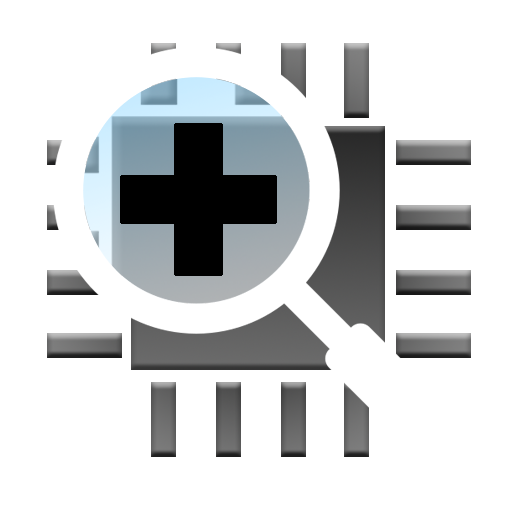
<style>
.page{position:relative;width:512px;height:512px;background:#ffffff}
.page>*{position:absolute;margin:0}
.t1{font:279.1px "Arial-Black";letter-spacing:0.02em;color:#000000;font-variant:small-caps;font-weight:bold;scale:1.03 1}
</style>
<div class="page">
<p class="t1" style="left:120px;top:123px;width:157px;height:153px">+</p>
</div>
